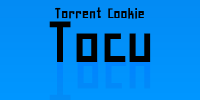
<style>
.page{position:relative;width:200px;height:100px}
.page>*{position:absolute;margin:0}
.t1{font:18px "H2sa1M";color:#000000}
.t2{font:72px "H2sa1M";color:#000000}
.t3{font:72px "H2sa1M";color:#0187fb}
</style>
<div class="page">
<p class="t1" style="left:55px;top:7px;width:89px;height:12px">Torrent Cookie</p>
<p class="t2" style="left:49px;top:21px;width:102px;height:41px">Tocu</p>
<p class="t3" style="left:49px;top:60px;width:102px;height:41px">Tocu</p>
</div>
